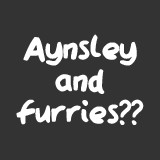
<style>
.page{position:relative;width:160px;height:160px;background:#333333}
.page>*{position:absolute;margin:0}
.t1{font:35.9px/31.9px "QAReports";color:#ffffff}
</style>
<div class="page">
<p class="t1" style="left:16px;top:34px;width:128px;height:91px;text-align:center">Aynsley<br>and<br>furries??</p>
</div>
